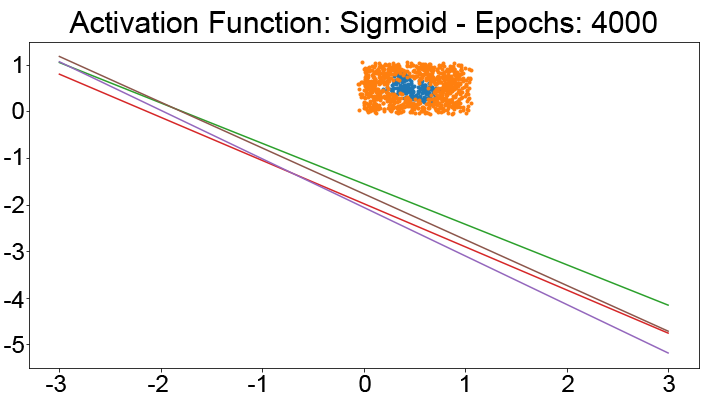
<style>
.page{position:relative;width:705px;height:401px;background:#ffffff}
.page>*{position:absolute;margin:0}
.t1{font:30px "ArialMT";color:#000000}
.t2{font:24px "ArialMT";color:#000000}
</style>
<div class="page">
<p class="t1" style="left:69px;top:11px;width:588px;height:28px">Activation Function: Sigmoid - Epochs: 4000</p>
<p class="t2" style="left:14px;top:56px;width:7px;height:17px">1</p>
<p class="t2" style="left:12px;top:102px;width:12px;height:17px">0</p>
<p class="t2" style="left:4px;top:148px;width:17px;height:17px">-1</p>
<p class="t2" style="left:4px;top:196px;width:20px;height:17px">-2</p>
<p class="t2" style="left:4px;top:243px;width:20px;height:17px">-3</p>
<p class="t2" style="left:4px;top:291px;width:20px;height:17px">-4</p>
<p class="t2" style="left:4px;top:336px;width:20px;height:17px">-5</p>
<p class="t2" style="left:46px;top:375px;width:20px;height:17px">-3</p>
<p class="t2" style="left:148px;top:375px;width:20px;height:17px">-2</p>
<p class="t2" style="left:248px;top:375px;width:17px;height:17px">-1</p>
<p class="t2" style="left:359px;top:375px;width:12px;height:17px">0</p>
<p class="t2" style="left:461px;top:375px;width:7px;height:17px">1</p>
<p class="t2" style="left:562px;top:375px;width:12px;height:17px">2</p>
<p class="t2" style="left:663px;top:375px;width:12px;height:17px">3</p>
</div>
